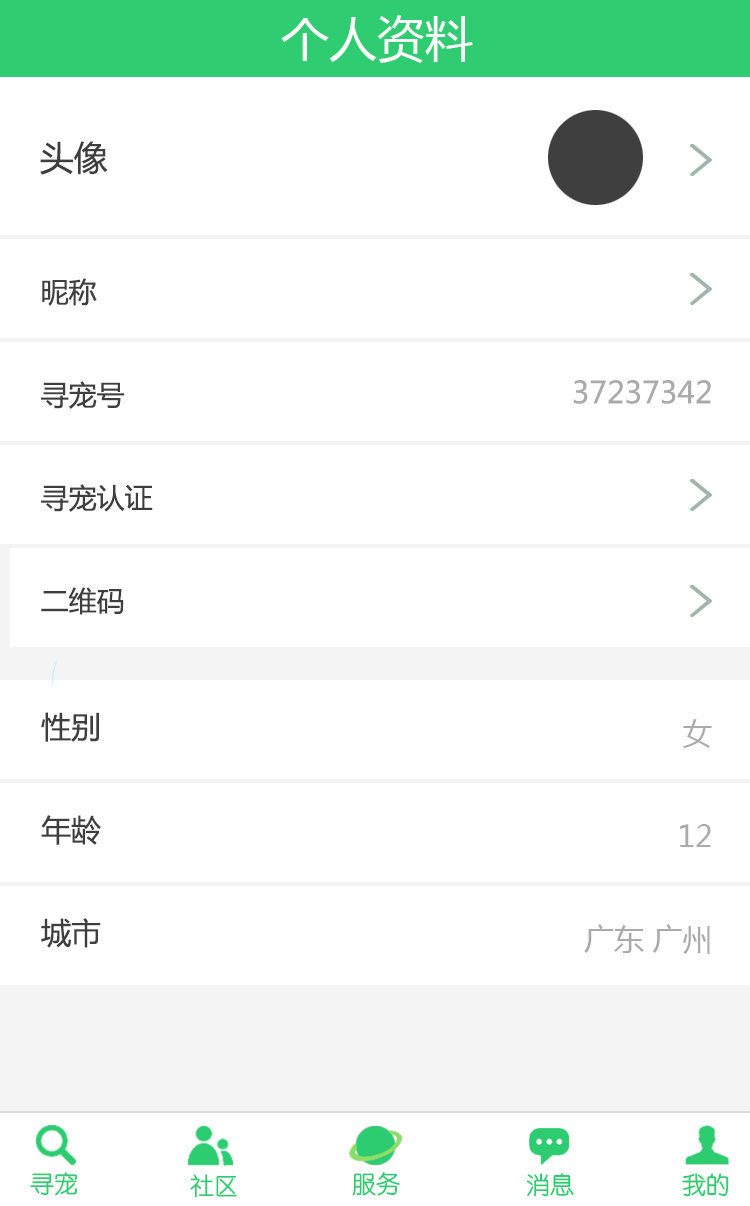
<style>
.page{position:relative;width:750px;height:1206px;background:#ffffff}
.page>*{position:absolute;margin:0}
.t1{font:48px "MicrosoftYaHei";color:#ffffff}
.t2{font:34px "MicrosoftYaHei";color:#3e3e3e}
.t3{font:28px/103px "MicrosoftYaHei";color:#3e3e3e}
.t4{font:28px/126px "MicrosoftYaHei";color:#3e3e3e}
.t5{font:30px "MicrosoftYaHei";color:#aaaaaa}
.t6{font:30px/103px "MicrosoftYaHei";color:#3e3e3e}
.t7{font:30px/103px "MicrosoftYaHei";color:#aaaaaa}
.t8{font:24px "STYuanti-SC-Regular";color:#2ecc71}
.t9{font:24px "STYuanti-SC-Regular"}
</style>
<div class="page">
<p class="t1" style="left:281px;top:15px;width:192px;height:48px">个人资料</p>
<p class="t2" style="left:40px;top:141px;width:68px;height:34px">头像</p>
<p class="t3" style="left:41px;top:278px;width:112px;height:337px"><span class="t4"><br><br></span>昵称<br>寻宠号<br>寻宠认证<br>二维码</p>
<p class="t5" style="left:573px;top:380px;width:138px;height:24px">37237342</p>
<p class="t6" style="left:41px;top:712px;width:60px;height:236px">性别<br>年龄<br>城市</p>
<p class="t7" style="left:584px;top:719px;width:128px;height:235px;text-align:right">女<br>12<br>广东 广州</p>
<p class="t8" style="left:30px;top:1172px;width:48px;height:24px">寻宠</p>
<p class="t8" style="left:190px;top:1174px;width:47px;height:24px">社区</p>
<p class="t9" style="left:352px;top:1173px;width:48px;height:24px">服务</p>
<p class="t8" style="left:352px;top:1172px;width:48px;height:24px">服务</p>
<p class="t9" style="left:526px;top:1173px;width:47px;height:24px">消息</p>
<p class="t8" style="left:527px;top:1173px;width:47px;height:24px">消息</p>
<p class="t8" style="left:682px;top:1173px;width:47px;height:24px">我的</p>
<p class="t8" style="left:682px;top:1173px;width:47px;height:24px">我的</p>
</div>
